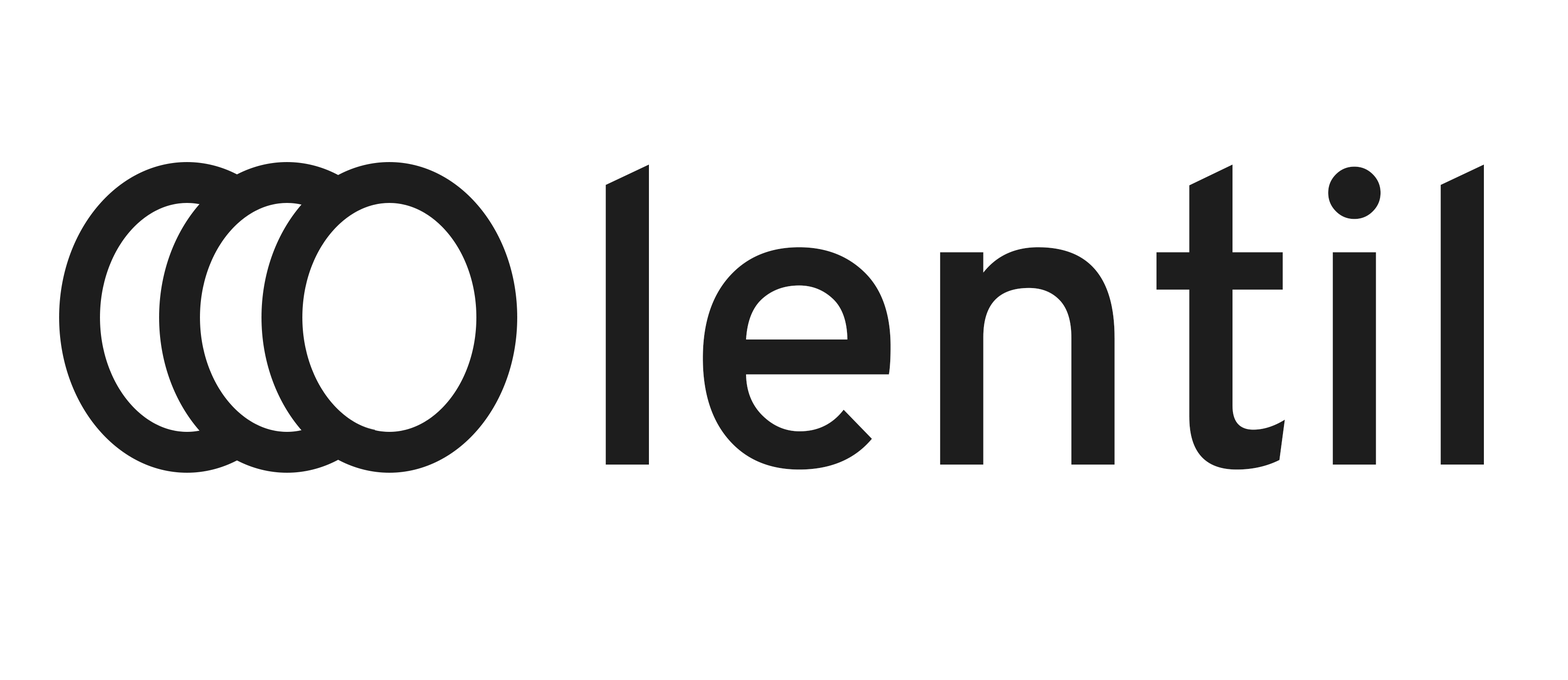
<style>
.page{position:relative;width:1568px;height:680px;background:#ffffff}
.page>*{position:absolute;margin:0}
.t1{font:415.3px "Overpass-SemiBold";color:#1d1d1d}
</style>
<div class="page">
<p class="t1" style="left:606px;top:164px;width:878px;height:306px">lentil</p>
</div>
